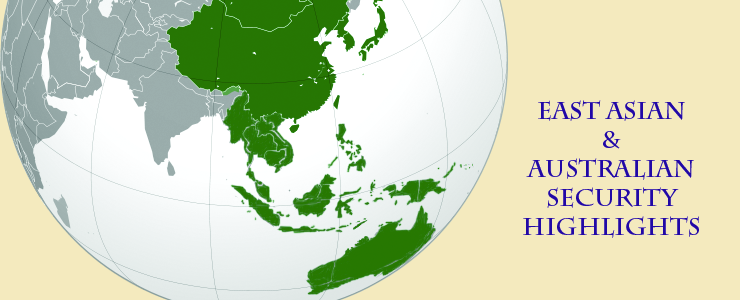
<style>
.page{position:relative;width:740px;height:300px;background:#f4eabe}
.page>*{position:absolute;margin:0}
.t1{font:24px "CharlemagneStd-Bold";color:#2108a6}
</style>
<div class="page">
<p class="t1" style="left:523px;top:100px;width:176px;height:138px">East Asian <br>&amp;<br>Australian<br>Security<br>highlights</p>
</div>
